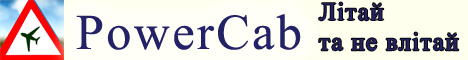
<style>
.page{position:relative;width:468px;height:60px;background:#fffff8}
.page>*{position:absolute;margin:0}
.t1{font:25px "TimesNewRomanPSMT";letter-spacing:0.05em;color:#232267}
.t2{font:50px "TimesNewRomanPSMT";letter-spacing:0.05em;color:#232267}
</style>
<div class="page">
<p class="t1" style="left:319px;top:2px;width:140px;height:49px">Літай <br>та не влітай</p>
<p class="t2" style="left:76px;top:14px;width:225px;height:36px">PowerCab</p>
</div>
